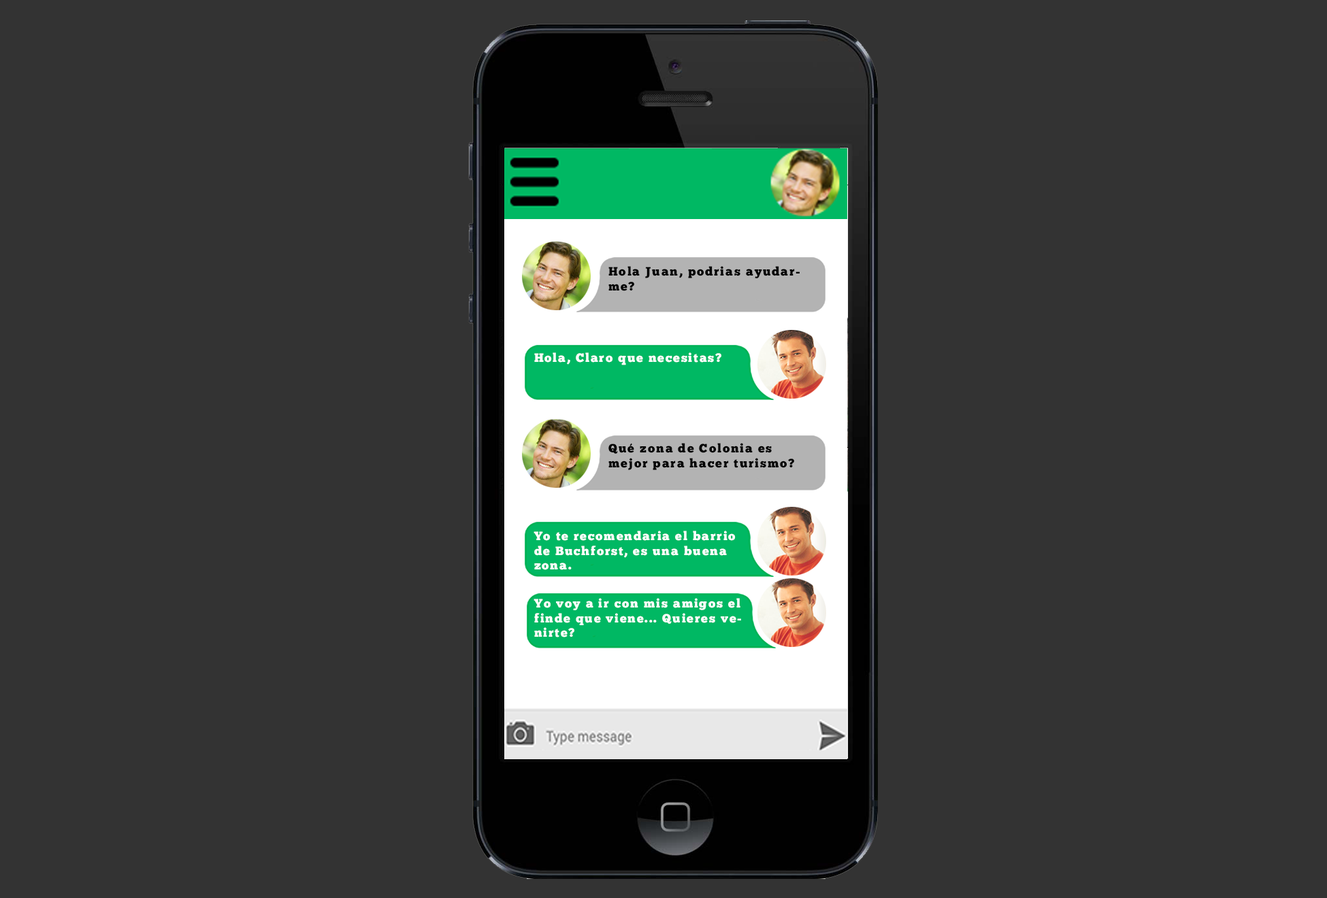
<style>
.page{position:relative;width:1327px;height:898px;background:#333333}
.page>*{position:absolute;margin:0}
.t1{font:12.3px "ChunkFive-Roman";letter-spacing:0.1em;color:#000000}
.t2{font:12.3px "ChunkFive-Roman";letter-spacing:0.1em;color:#ffffff}
.t3{font:12.2px "ChunkFive-Roman";letter-spacing:0.1em;color:#ffffff}
</style>
<div class="page">
<p class="t1" style="left:608px;top:266px;width:192px;height:25px">Hola Juan, podrias ayudarme?</p>
<p class="t2" style="left:534px;top:353px;width:187px;height:12px">Hola, Claro que necesitas?</p>
<p class="t1" style="left:608px;top:443px;width:186px;height:27px">Qué zona de Colonia es mejor para hacer turismo?</p>
<p class="t2" style="left:534px;top:531px;width:202px;height:39px">Yo te recomendaria el barrio de Buchforst, es una buena zona.</p>
<p class="t3" style="left:534px;top:598px;width:207px;height:40px">Yo voy a ir con mis amigos el finde que viene... Quieres venirte?</p>
</div>
